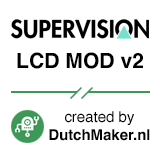
<style>
.page{position:relative;width:160px;height:160px;background:#ffffff}
.page>*{position:absolute;margin:0}
.t1{font:21.1px "Helvetica-Bold";color:#000000}
.t2{font:15px "Helvetica";color:#000000}
.t3{font:15px "Helvetica-Bold";color:#000000}
</style>
<div class="page">
<p class="t1" style="left:17px;top:52px;width:126px;height:17px">LCD MOD v2</p>
<p class="t2" style="left:65px;top:111px;width:69px;height:14px">created by</p>
<p class="t3" style="left:49px;top:129px;width:101px;height:12px">DutchMaker.nl</p>
</div>
